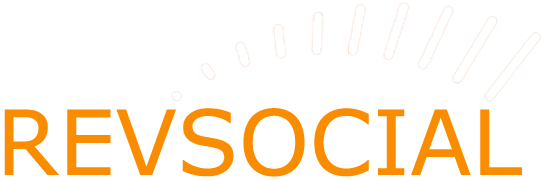
<style>
.page{position:relative;width:548px;height:181px;background:#ffffff}
.page>*{position:absolute;margin:0}
.t1{font:90px "Verdana";color:#fa8c00}
</style>
<div class="page">
<p class="t1" style="left:4px;top:108px;width:518px;height:69px">REVSOCIAL</p>
</div>
